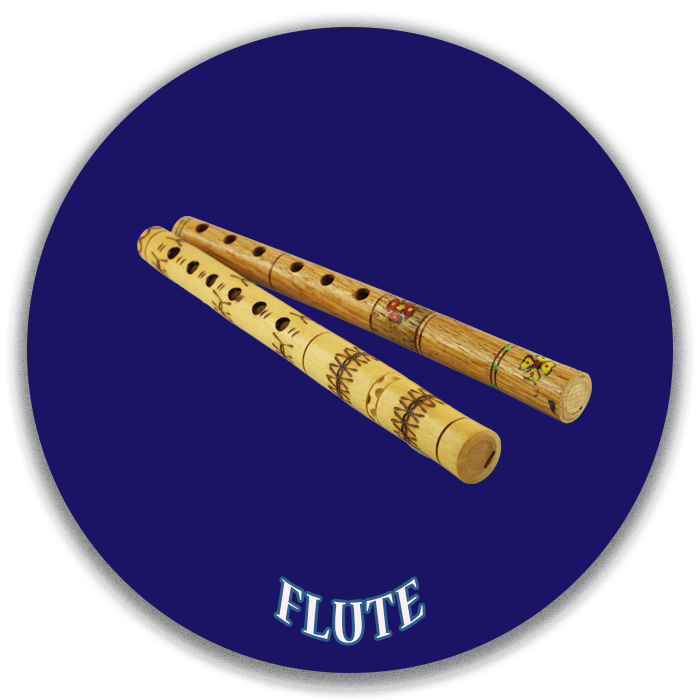
<style>
.page{position:relative;width:700px;height:700px;background:#1b1464}
.page>*{position:absolute;margin:0}
.t1{font:58.3px "NuevaStd-Bold";letter-spacing:0.05em;color:#f8f0f2;text-transform:uppercase;scale:0.83 1}
</style>
<div class="page">
<p class="t1" style="left:276px;top:579px;width:147px;height:64px;rotate:-1deg">flute</p>
</div>
